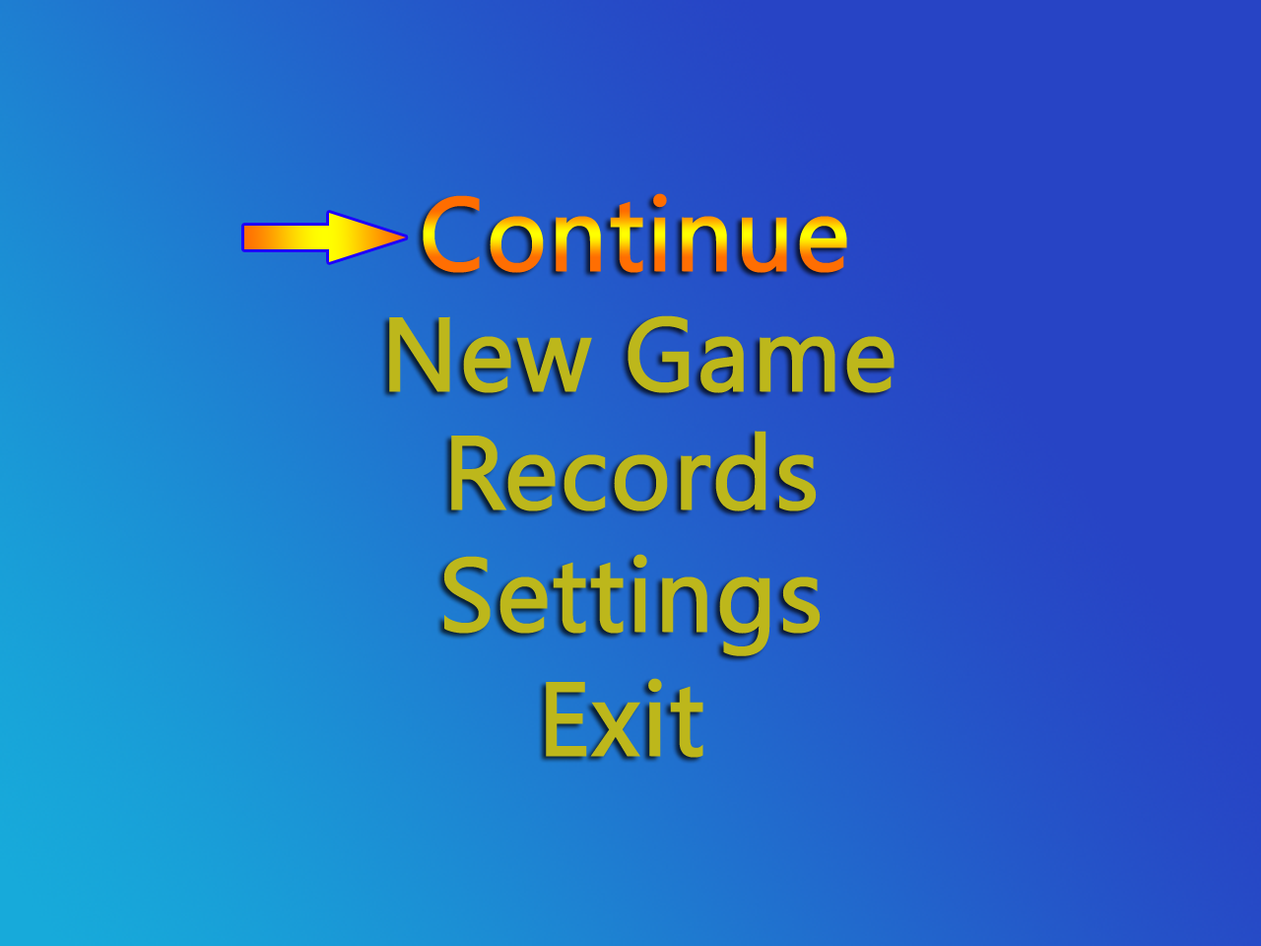
<style>
.page{position:relative;width:1261px;height:946px}
.page>*{position:absolute;margin:0}
.t1{font:102.4px "SegoeUI";font-weight:bold}
.t2{font:102.4px "SegoeUI";color:#bdb71b;font-weight:bold}
</style>
<div class="page">
<p class="t1" style="left:423px;top:193px;width:424px;height:80px">Continue</p>
<p class="t2" style="left:389px;top:315px;width:505px;height:78px">New Game</p>
<p class="t2" style="left:451px;top:430px;width:366px;height:81px">Records</p>
<p class="t2" style="left:443px;top:554px;width:378px;height:102px">Settings</p>
<p class="t2" style="left:546px;top:678px;width:157px;height:80px">Exit</p>
</div>
